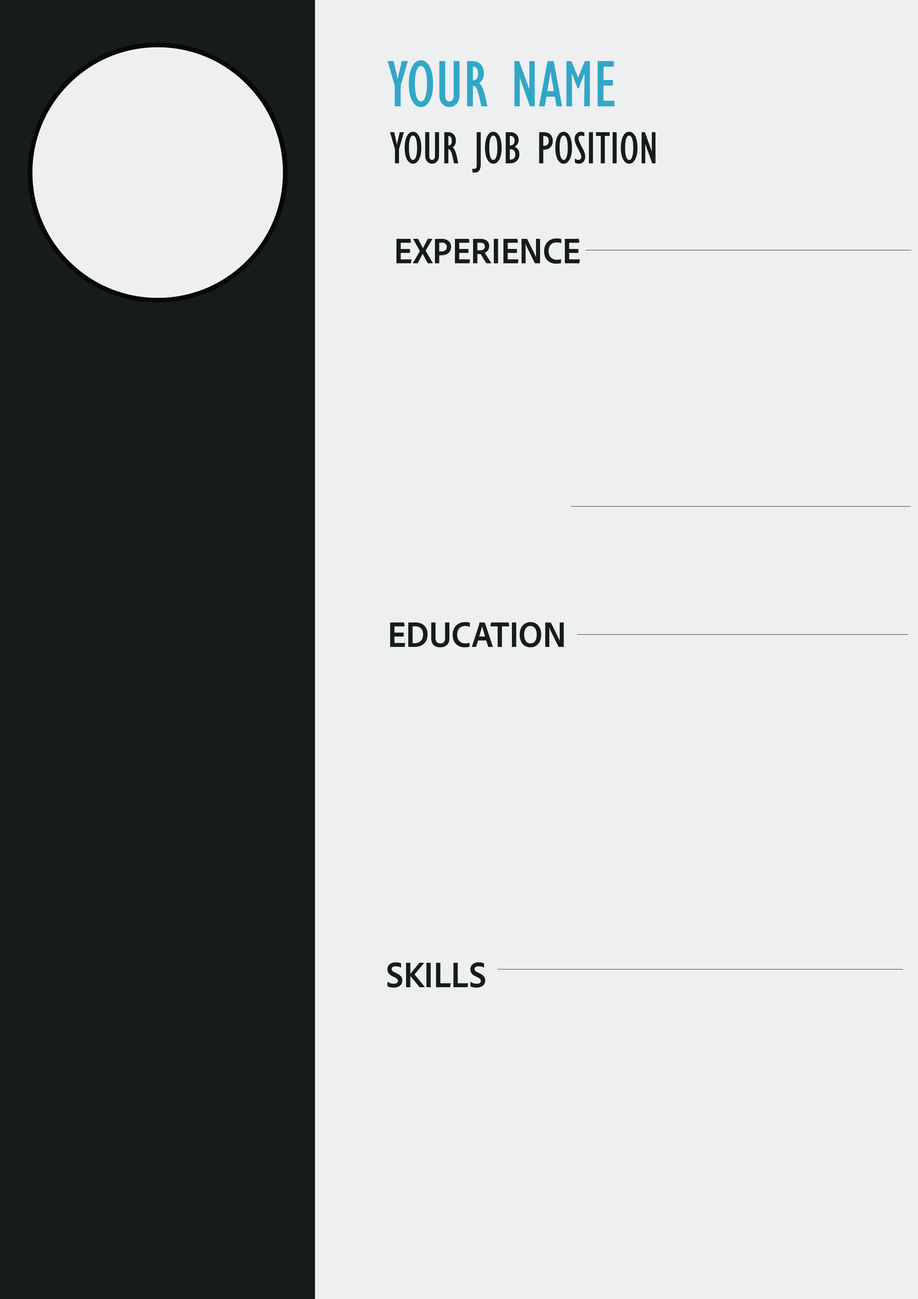
<style>
.page{position:relative;width:918px;height:1299px;background:#eeeff1}
.page>*{position:absolute;margin:0}
.t1{font:67.9px "GillSansMT-Condensed";color:#30a7c7}
.t2{font:46.3px "GillSansMT-Condensed";color:#171b1c}
.t3{font:37px "AdobeClean-BoldSemiCn";color:#171b1c}
</style>
<div class="page">
<p class="t1" style="left:388px;top:60px;width:227px;height:47px">YOUR NAME</p>
<p class="t2" style="left:390px;top:132px;width:266px;height:41px">YOUR JOB POSITION</p>
<p class="t3" style="left:397px;top:238px;width:183px;height:26px">EXPERIENCE</p>
<p class="t3" style="left:390px;top:622px;width:174px;height:25px">EDUCATION</p>
<p class="t3" style="left:387px;top:962px;width:98px;height:25px">SKILLS</p>
</div>
